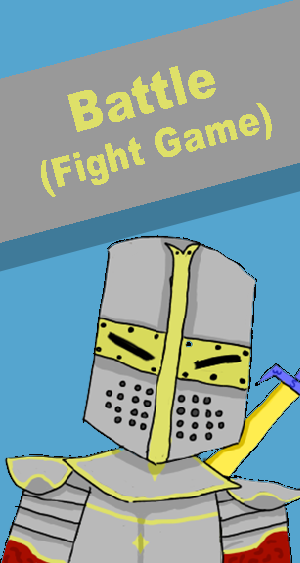
<style>
.page{position:relative;width:300px;height:563px;background:#55a5cf}
.page>*{position:absolute;margin:0}
.t1{font:40px "Arial-Black";color:#dee069;scale:0.84 1}
.t2{font:53.5px "Arial-Black";color:#dee069;scale:0.84 1}
</style>
<div class="page">
<p class="t1" style="left:41px;top:66px;width:231px;height:131px;text-align:center;rotate:-15deg"><span class="t2">Battle<br></span>(Fight Game)</p>
</div>
